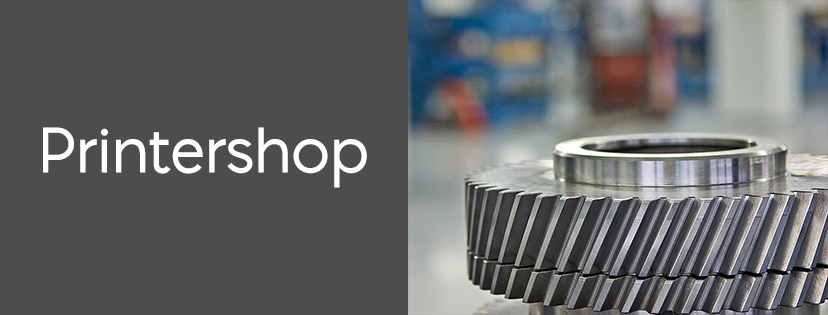
<style>
.page{position:relative;width:828px;height:315px;background:#4d4d4d}
.page>*{position:absolute;margin:0}
.t1{font:60px "Pontiac-Regular";color:#ffffff}
</style>
<div class="page">
<p class="t1" style="left:43px;top:127px;width:324px;height:61px">Printershop</p>
</div>
